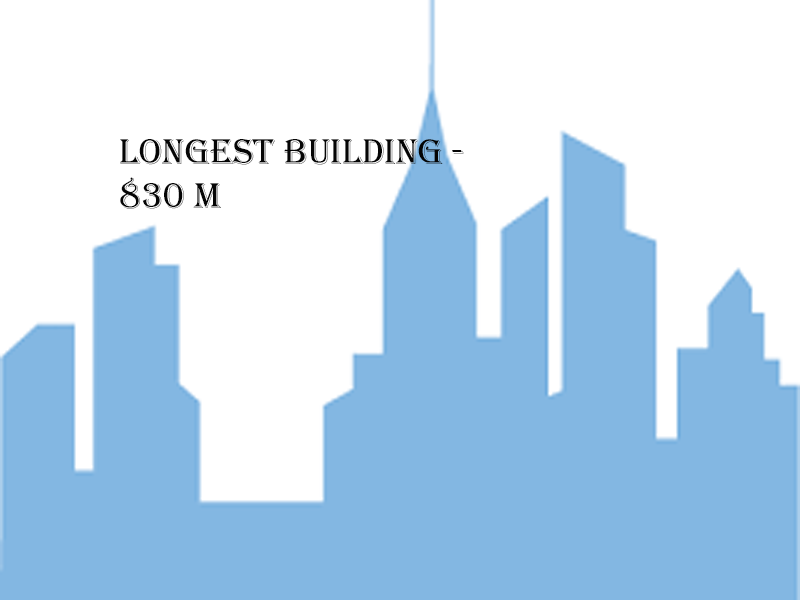
<style>
.page{position:relative;width:800px;height:600px;background:#ffffff}
.page>*{position:absolute;margin:0}
.t1{font:37px "Algerian";color:#050505}
</style>
<div class="page">
<p class="t1" style="left:120px;top:139px;width:344px;height:70px">longest building - <br>830 m</p>
</div>
